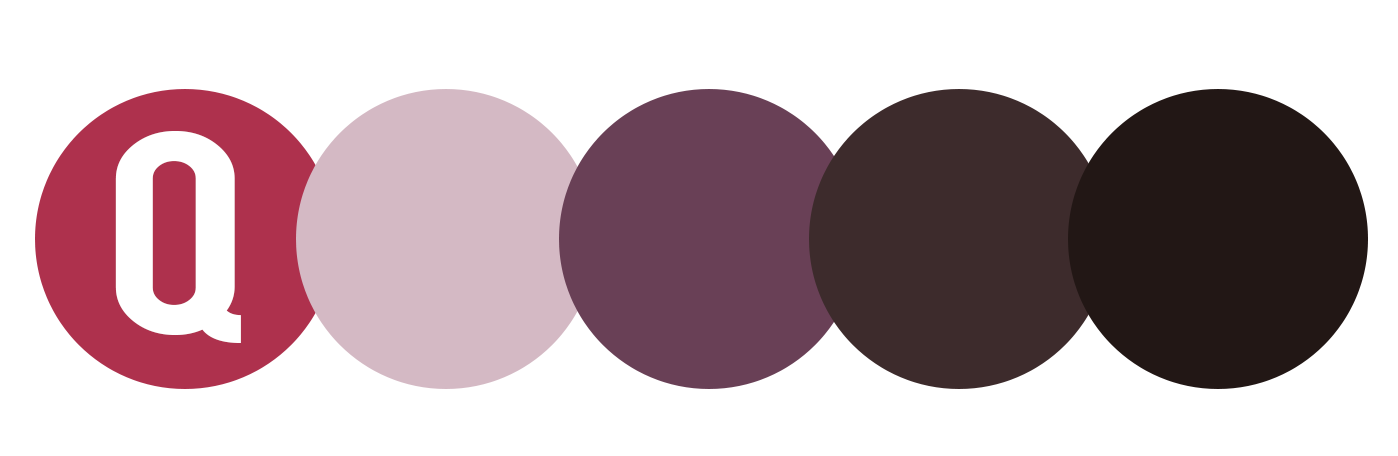
<style>
.page{position:relative;width:1398px;height:456px;background:#ffffff}
.page>*{position:absolute;margin:0}
.t1{font:223.3px "Bebas";letter-spacing:0.415em;color:#ffffff;scale:1.25 1}
</style>
<div class="page">
<p class="t1" style="left:115px;top:131px;width:126px;height:212px">Q</p>
</div>
